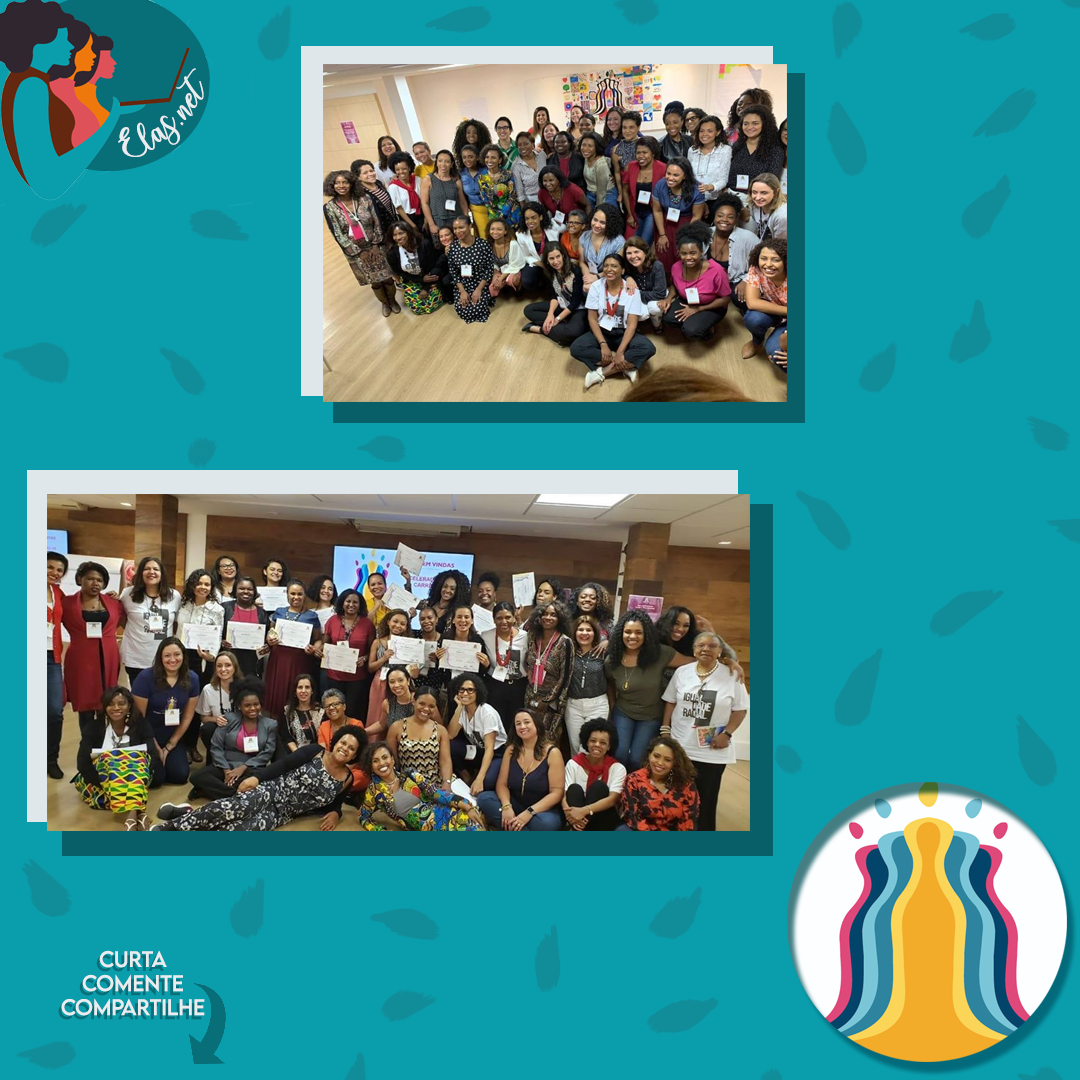
<style>
.page{position:relative;width:1080px;height:1080px;background:#0a9eac}
.page>*{position:absolute;margin:0}
.t1{font:25px "charlinda-Regular";color:#e9edf0;scale:1.18 1}
.t2{font:20px "LEMONMILK-Regular";color:#e9edf0}
.t3{font:20px "LEMONMILK-Regular";color:#086e78}
</style>
<div class="page">
<p class="t1" style="left:118px;top:68px;width:86px;height:89px;rotate:-43deg">Elas.net</p>
<p class="t2" style="left:61px;top:950px;width:144px;height:66px;text-align:center">Curta<br>Comente<br>Compartilhe</p>
<p class="t3" style="left:58px;top:954px;width:144px;height:66px;text-align:center">Curta<br>Comente<br>Compartilhe</p>
</div>
